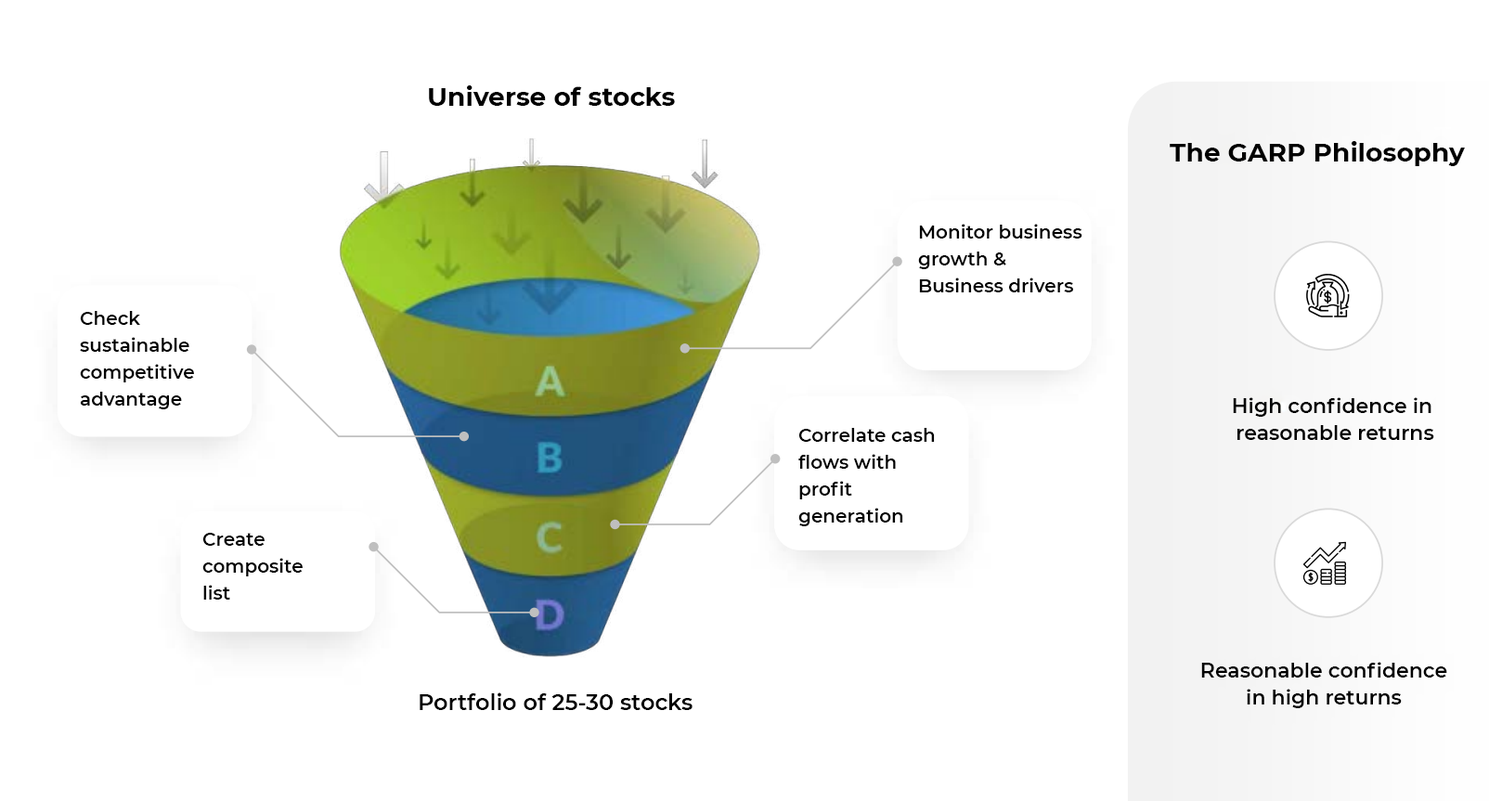
<style>
.page{position:relative;width:1489px;height:801px;background:#ffffff}
.page>*{position:absolute;margin:0}
.t1{font:26px "Montserrat-Bold";color:#000000}
.t2{font:18.6px/26.9px "Montserrat-SemiBold";color:#000000}
.t3{font:20.4px/26.9px "Montserrat-SemiBold";color:#000000}
.t4{font:22.3px "Montserrat-SemiBold";color:#000000}
</style>
<div class="page">
<p class="t1" style="left:429px;top:85px;width:246px;height:21px">Universe of stocks</p>
<p class="t1" style="left:1169px;top:141px;width:296px;height:25px">The GARP Philosophy</p>
<p class="t2" style="left:918px;top:224px;width:164px;height:68px">Monitor business<br>growth &amp; <br>Business drivers</p>
<p class="t2" style="left:80px;top:311px;width:114px;height:98px">Check <br>sustainable <br>competitive <br>advantage</p>
<p class="t3" style="left:1233px;top:397px;width:201px;height:43px;text-align:center">High confidence in <br>reasonable returns</p>
<p class="t2" style="left:798px;top:428px;width:137px;height:98px">Correlate cash<br>flows with<br>profit<br>generation</p>
<p class="t2" style="left:202px;top:533px;width:101px;height:67px">Create<br>composite<br>list</p>
<p class="t3" style="left:1201px;top:662px;width:246px;height:46px;text-align:center">Reasonable confidence<br>in high returns</p>
<p class="t4" style="left:420px;top:692px;width:272px;height:18px">Portfolio of 25-30 stocks</p>
</div>
